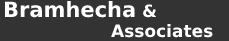
<style>
.page{position:relative;width:229px;height:41px;background:#333333}
.page>*{position:absolute;margin:0}
.t1{font:17px "DejaVuSans-Bold";color:#ffffff}
.t2{font:21px "DejaVuSans-Bold";color:#ffffff}
</style>
<div class="page">
<p class="t1" style="left:4px;top:1px;width:209px;height:37px"><span class="t2">Bramhecha </span>&amp;<br>   Associates</p>
</div>
